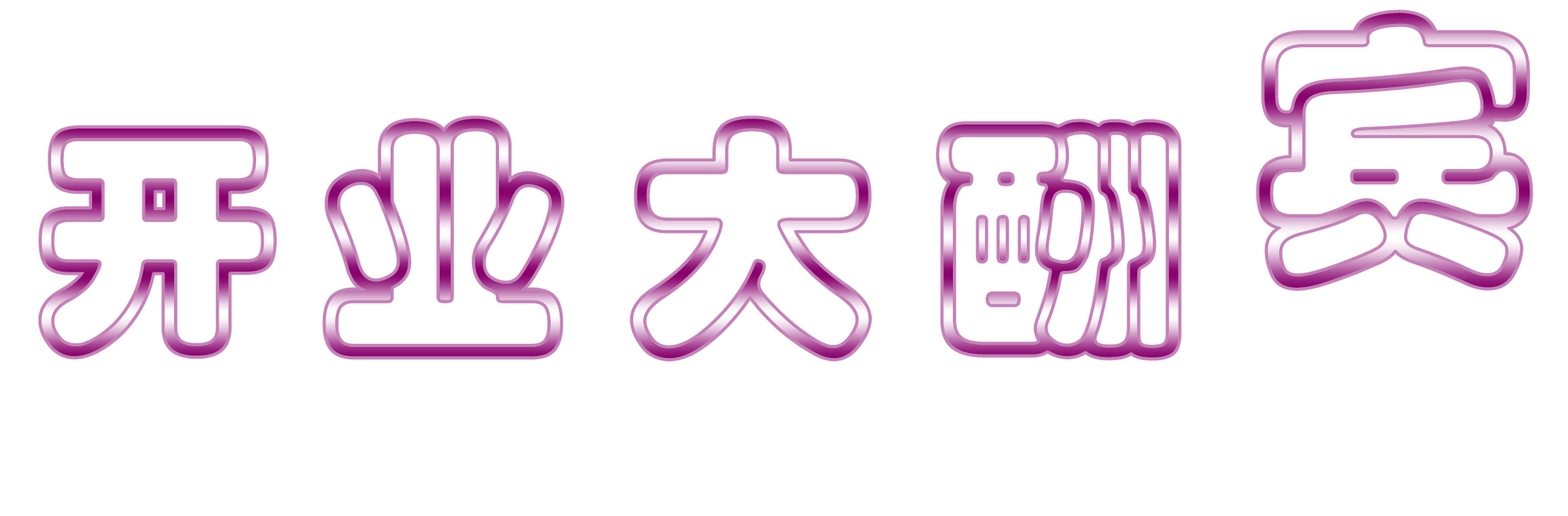
<style>
.page{position:relative;width:1568px;height:516px;background:#ffffff}
.page>*{position:absolute;margin:0}
.t1{font:285.8px "STCaiyun"}
.t2{font:250.4px "STCaiyun"}
</style>
<div class="page">
<p class="t1" style="left:1259px;top:13px;width:271px;height:275px">宾</p>
<p class="t2" style="left:326px;top:119px;width:236px;height:238px">业</p>
<p class="t2" style="left:633px;top:119px;width:236px;height:239px">大</p>
<p class="t2" style="left:939px;top:122px;width:240px;height:235px">酬</p>
<p class="t2" style="left:41px;top:128px;width:233px;height:229px">开</p>
</div>
